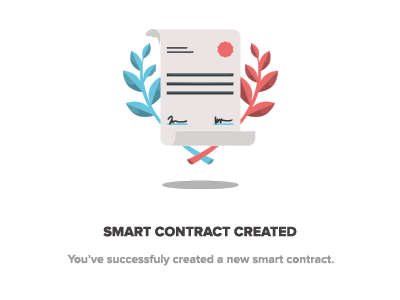
<style>
.page{position:relative;width:400px;height:300px;background:#ffffff}
.page>*{position:absolute;margin:0}
.t1{font:14px "ProximaNova-Extrabld";color:#444040;text-transform:uppercase}
.t2{font:12px "ProximaNova-Bold";color:#9c9a9a}
</style>
<div class="page">
<p class="t1" style="left:103px;top:226px;width:194px;height:11px">SMart Contract Created</p>
<p class="t2" style="left:67px;top:254px;width:267px;height:12px">You’ve successfuly created a new smart contract.</p>
</div>
